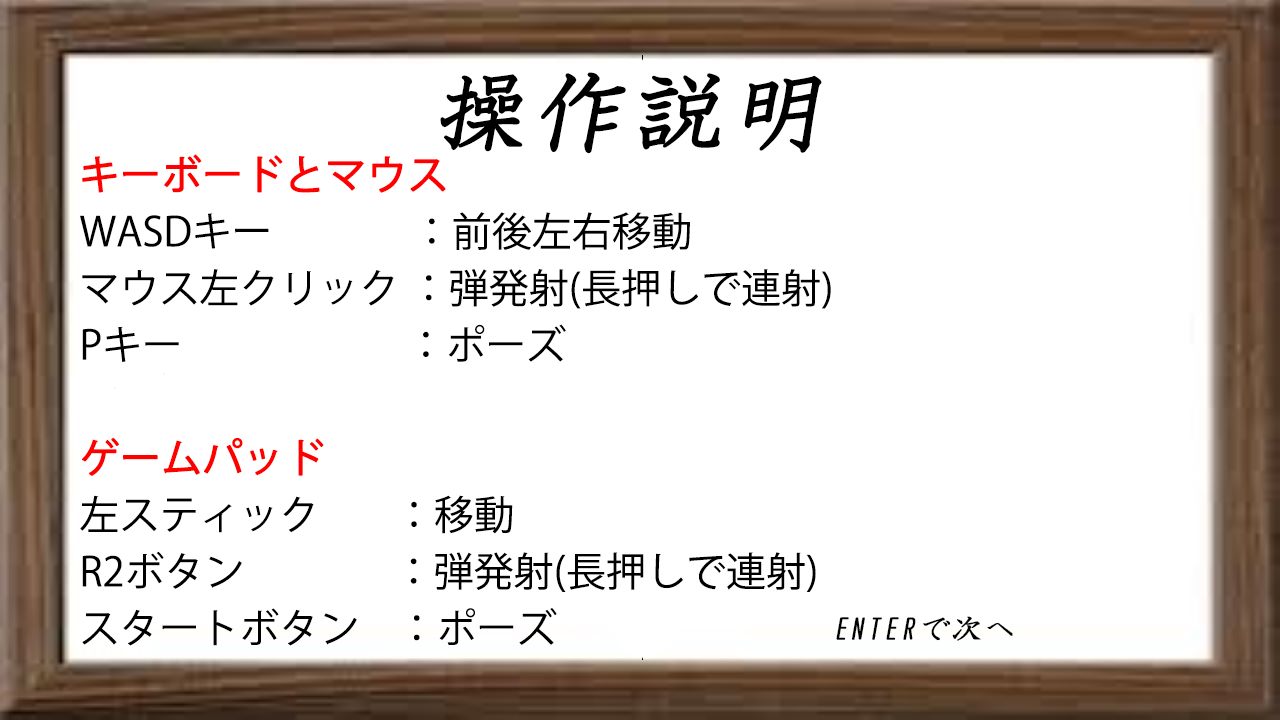
<style>
.page{position:relative;width:1280px;height:720px;background:#ffffff}
.page>*{position:absolute;margin:0}
.t1{font:96px "HGPKyokashotai";color:#000000;font-weight:bold;font-style:italic}
.t2{font:40px "KozGoPr6N-Regular";color:#000000}
.t3{font:40px "KozGoPr6N-Regular";color:#ff0000;font-weight:bold}
</style>
<div class="page">
<p class="t1" style="left:440px;top:72px;width:382px;height:82px">操作説明</p>
<p class="t2" style="left:80px;top:154px;width:751px;height:492px"><span class="t3">キーボードとマウス<br></span>WASDキー               ：前後左右移動<br>マウス左クリック ：弾発射(長押しで連射)<br>Pキー                        ：ポーズ<br><br><span class="t3">ゲームパッド<br></span>左スティック        ：移動<br>R2ボタン                ：弾発射(長押しで連射)<br>スタートボタン    ：ポーズ</p>
</div>
